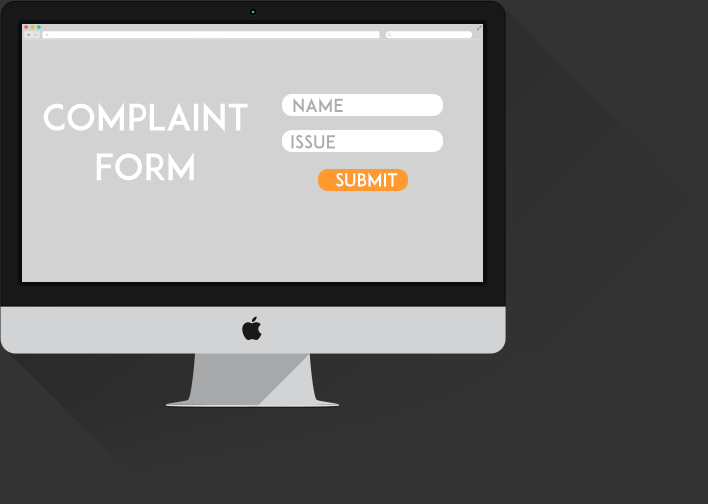
<style>
.page{position:relative;width:708px;height:504px;background:#333333}
.page>*{position:absolute;margin:0}
.t1{font:36px "ADAM.CGPRO";color:#ffffff}
.t2{font:18px "ADAM.CGPRO";color:#acacac}
.t3{font:18px "ADAM.CGPRO";color:#ffffff}
</style>
<div class="page">
<p class="t1" style="left:43px;top:102px;width:205px;height:79px;text-align:center">COMPLAINT<br>FORM</p>
<p class="t2" style="left:293px;top:98px;width:50px;height:15px">NAME</p>
<p class="t2" style="left:291px;top:135px;width:44px;height:14px">ISSUE</p>
<p class="t3" style="left:336px;top:172px;width:62px;height:15px">submit</p>
</div>
